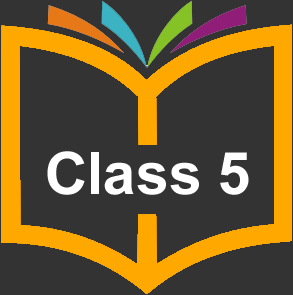
<style>
.page{position:relative;width:293px;height:295px;background:#333333}
.page>*{position:absolute;margin:0}
.t1{font:58.7px "Arial-BoldMT";color:#ffffff}
</style>
<div class="page">
<p class="t1" style="left:47px;top:151px;width:202px;height:44px">Class 5</p>
</div>
